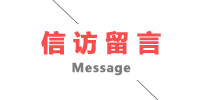
<style>
.page{position:relative;width:200px;height:100px;background:#ffffff}
.page>*{position:absolute;margin:0}
.t1{font:24px "MicrosoftYaHei-Bold";letter-spacing:0.3em;color:#fb4d4c;font-weight:bold}
.t2{font:12px "MicrosoftYaHei-Bold";letter-spacing:0.05em;color:#7d7d7d;font-weight:bold}
</style>
<div class="page">
<p class="t1" style="left:41px;top:31px;width:120px;height:24px">信访留言</p>
<p class="t2" style="left:72px;top:62px;width:59px;height:14px">Message</p>
</div>
